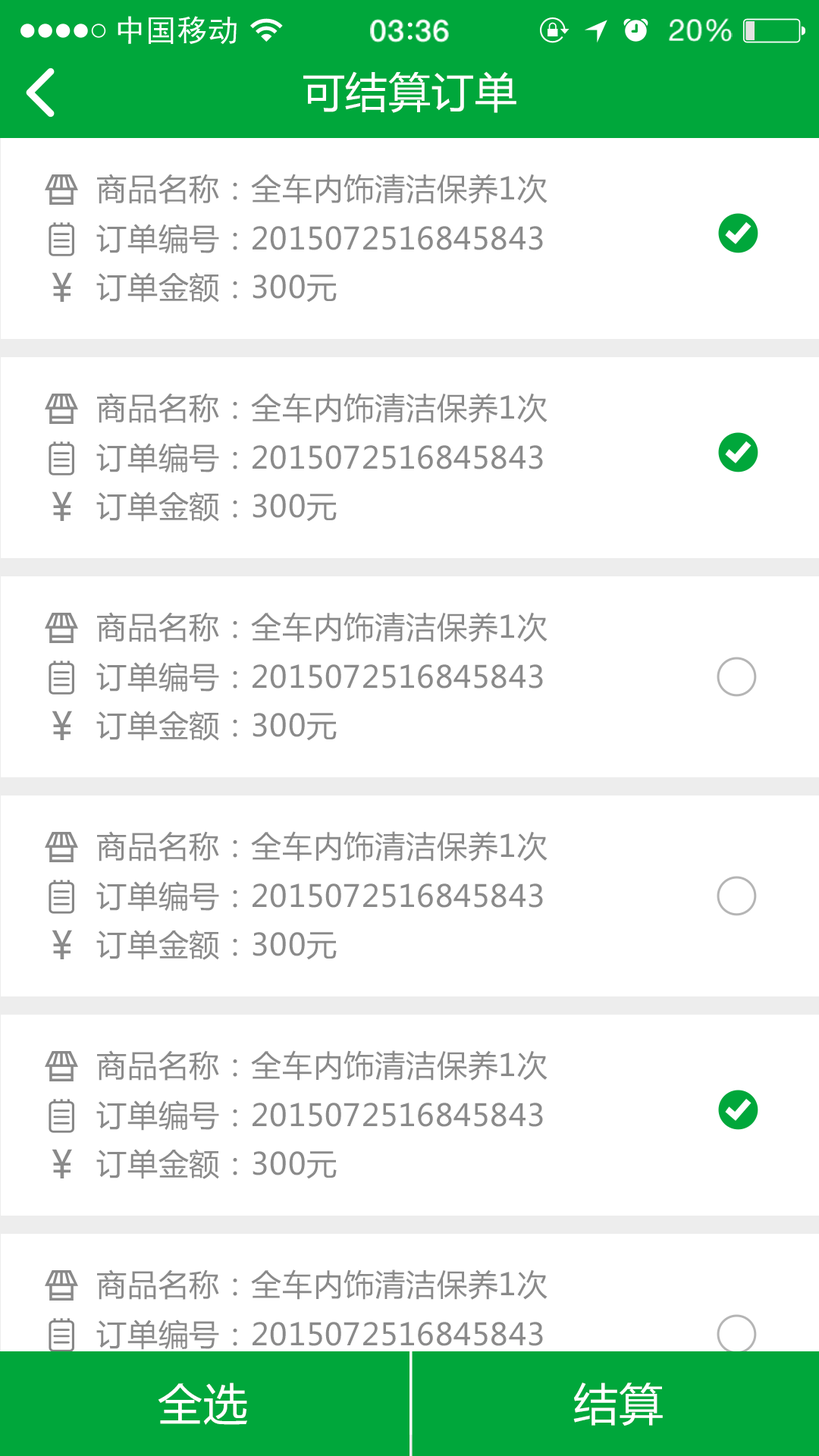
<style>
.page{position:relative;width:819px;height:1456px;background:#ffffff}
.page>*{position:absolute;margin:0}
.t1{font:41.7px "MicrosoftYaHei";letter-spacing:0.02em;color:#ffffff}
.t2{font:30.3px "MicrosoftYaHei";letter-spacing:0.02em;color:#8a8a8a}
.t3{font:38.4px "MicrosoftYaHei";letter-spacing:0.02em;color:#8a8a8a}
.t4{font:44px "MicrosoftYaHei";letter-spacing:0.02em;color:#ffffff}
</style>
<div class="page">
<p class="t1" style="left:303px;top:71px;width:213px;height:42px">可结算订单</p>
<p class="t2" style="left:97px;top:174px;width:451px;height:30px">商品名称：全车内饰清洁保养1次</p>
<p class="t2" style="left:96px;top:224px;width:447px;height:30px">订单编号：2015072516845843</p>
<p class="t3" style="left:52px;top:272px;width:20px;height:30px">¥</p>
<p class="t2" style="left:96px;top:272px;width:241px;height:31px">订单金额：300元</p>
<p class="t2" style="left:97px;top:393px;width:451px;height:30px">商品名称：全车内饰清洁保养1次</p>
<p class="t2" style="left:96px;top:443px;width:447px;height:30px">订单编号：2015072516845843</p>
<p class="t3" style="left:52px;top:491px;width:20px;height:30px">¥</p>
<p class="t2" style="left:96px;top:491px;width:241px;height:31px">订单金额：300元</p>
<p class="t2" style="left:97px;top:612px;width:451px;height:30px">商品名称：全车内饰清洁保养1次</p>
<p class="t2" style="left:96px;top:662px;width:447px;height:30px">订单编号：2015072516845843</p>
<p class="t3" style="left:52px;top:711px;width:20px;height:29px">¥</p>
<p class="t2" style="left:96px;top:711px;width:241px;height:30px">订单金额：300元</p>
<p class="t2" style="left:97px;top:831px;width:451px;height:30px">商品名称：全车内饰清洁保养1次</p>
<p class="t2" style="left:96px;top:881px;width:447px;height:31px">订单编号：2015072516845843</p>
<p class="t3" style="left:52px;top:930px;width:20px;height:29px">¥</p>
<p class="t2" style="left:96px;top:930px;width:241px;height:30px">订单金额：300元</p>
<p class="t2" style="left:97px;top:1050px;width:451px;height:31px">商品名称：全车内饰清洁保养1次</p>
<p class="t2" style="left:96px;top:1100px;width:447px;height:31px">订单编号：2015072516845843</p>
<p class="t3" style="left:52px;top:1149px;width:20px;height:29px">¥</p>
<p class="t2" style="left:96px;top:1149px;width:241px;height:30px">订单金额：300元</p>
<p class="t2" style="left:97px;top:1269px;width:451px;height:31px">商品名称：全车内饰清洁保养1次</p>
<p class="t2" style="left:96px;top:1319px;width:447px;height:31px">订单编号：2015072516845843</p>
<p class="t4" style="left:158px;top:1382px;width:89px;height:43px">全选</p>
<p class="t4" style="left:573px;top:1382px;width:90px;height:44px">结算</p>
</div>
